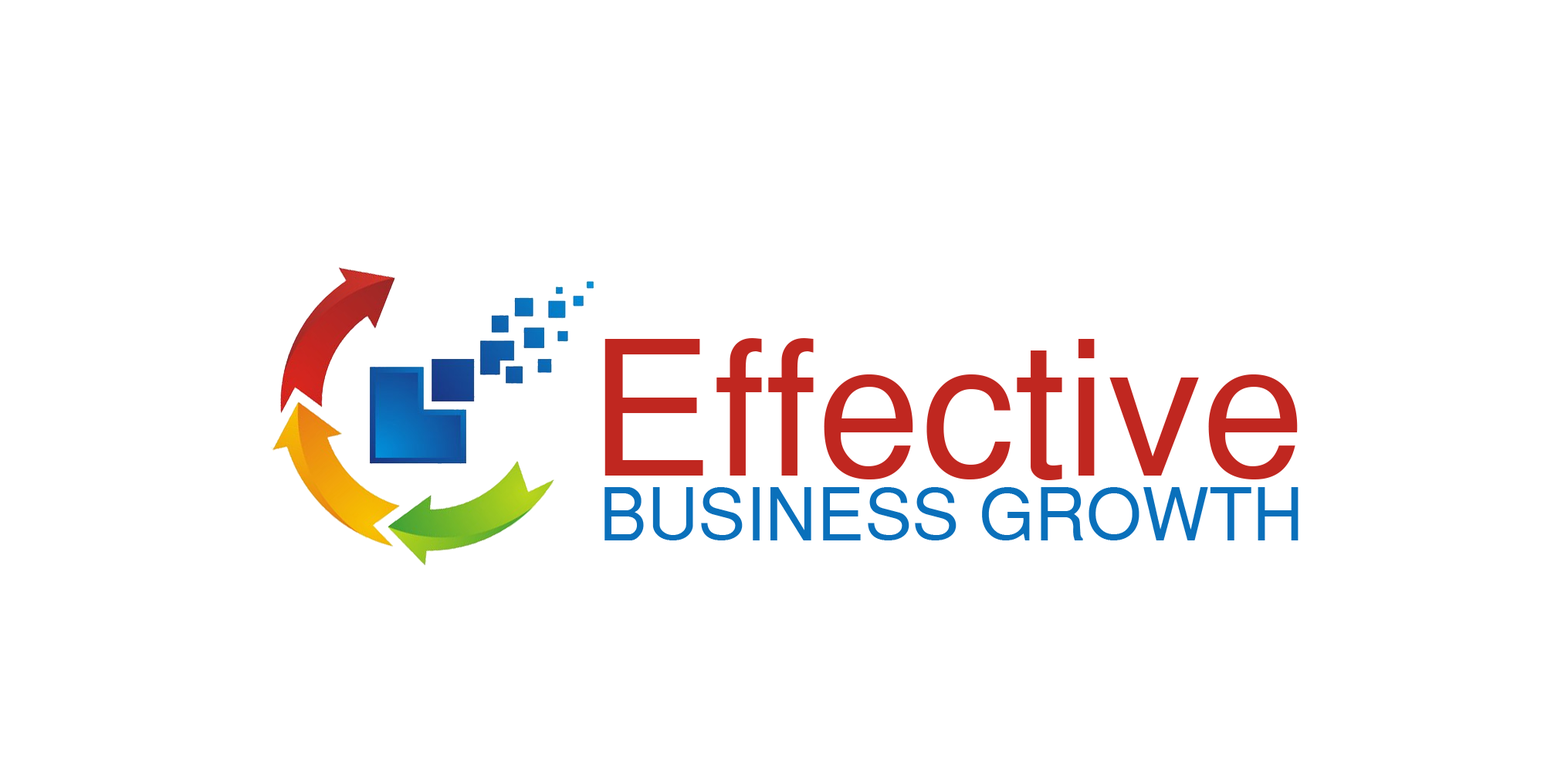
<style>
.page{position:relative;width:1544px;height:772px;background:#ffffff}
.page>*{position:absolute;margin:0}
.t1{font:187.4px "SansSerif";color:#c02720}
.t2{font:71.4px "SansSerif";color:#0a70bb;text-transform:uppercase}
</style>
<div class="page">
<p class="t1" style="left:605px;top:338px;width:693px;height:142px">Effective</p>
<p class="t2" style="left:605px;top:487px;width:694px;height:54px">Business Growth</p>
</div>
